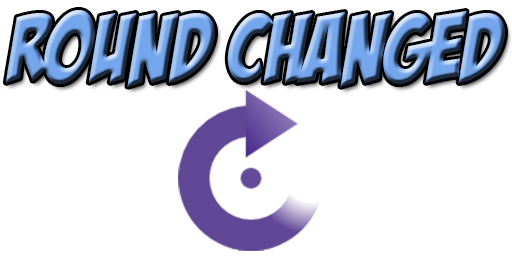
<style>
.page{position:relative;width:512px;height:256px;background:#ffffff}
.page>*{position:absolute;margin:0}
.t1{font:94.8px "BadaBoomBB";letter-spacing:0.003em}
</style>
<div class="page">
<p class="t1" style="left:5px;top:10px;width:500px;height:77px">Round Changed</p>
</div>
